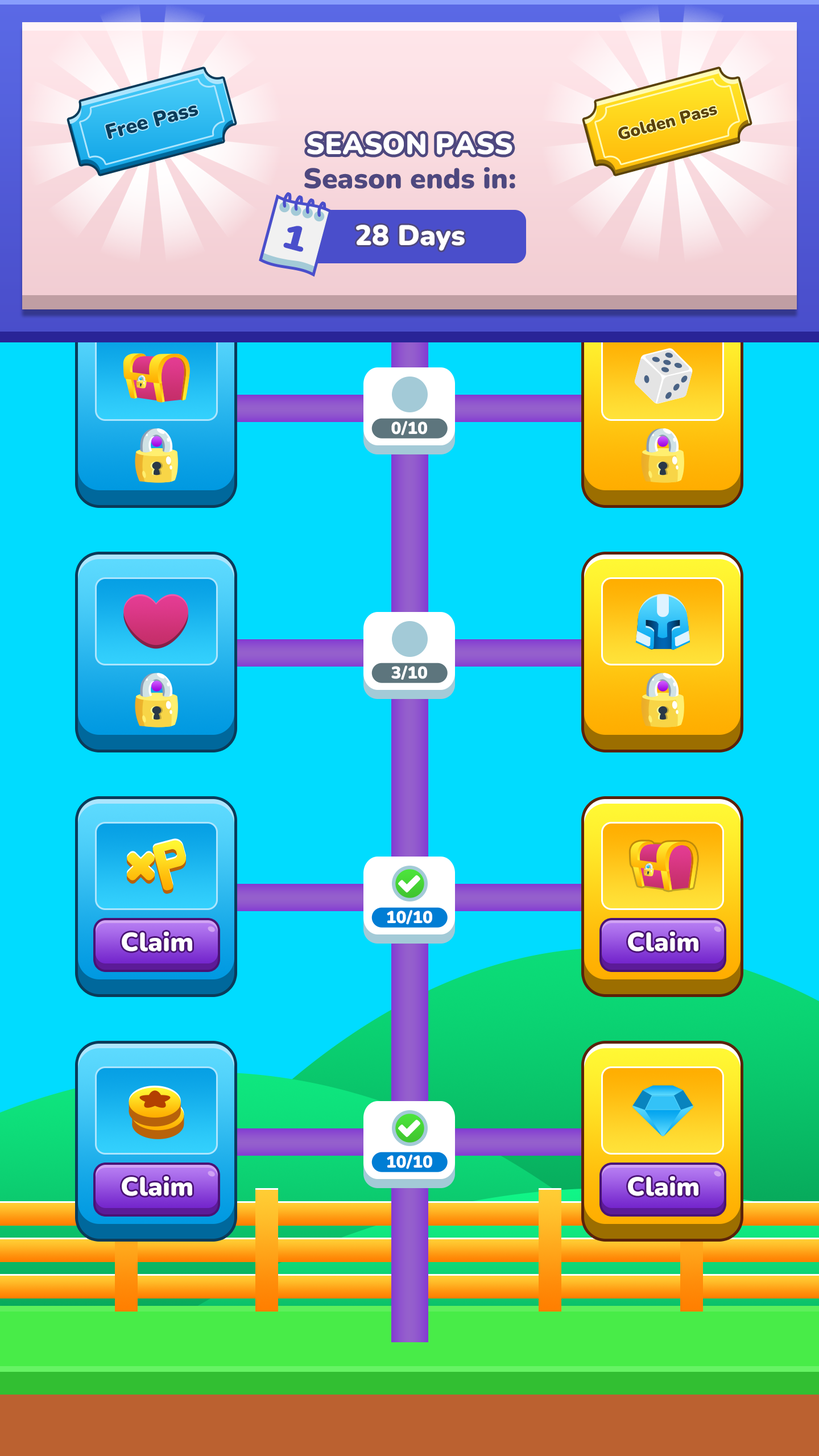
<style>
.page{position:relative;width:819px;height:1456px;background:#00dcff}
.page>*{position:absolute;margin:0}
.t1{font:20.5px "Nunito-Black";color:#0a3b5a}
.t2{font:17.1px "Nunito-Black";color:#5a420a}
.t3{font:28.4px "Nunito-Black";color:#ffffff}
.t4{font:28.4px "Nunito-Black";color:#4e487f}
.t5{font:34.4px "Nunito-Black";color:#4a4ecb;scale:1.16 1}
.t6{font:17.1px "Nunito-Black";color:#ffffff}
.t7{font:26px "Nunito-Black";color:#ffffff}
</style>
<div class="page">
<p class="t1" style="left:105px;top:105px;width:93px;height:34px;rotate:-15deg">Free Pass</p>
<p class="t2" style="left:618px;top:106px;width:99px;height:33px;rotate:-15deg">Golden Pass</p>
<p class="t3" style="left:307px;top:134px;width:205px;height:21px">SEASON PASS</p>
<p class="t4" style="left:304px;top:167px;width:211px;height:22px">Season ends in:</p>
<p class="t5" style="left:283px;top:226px;width:21px;height:26px;rotate:15deg">1</p>
<p class="t3" style="left:356px;top:225px;width:109px;height:26px">28 Days</p>
<p class="t6" style="left:391px;top:421px;width:36px;height:15px">0/10</p>
<p class="t6" style="left:391px;top:665px;width:36px;height:15px">3/10</p>
<p class="t6" style="left:387px;top:910px;width:45px;height:15px">10/10</p>
<p class="t7" style="left:122px;top:932px;width:70px;height:20px">Claim</p>
<p class="t7" style="left:628px;top:932px;width:70px;height:20px">Claim</p>
<p class="t6" style="left:387px;top:1155px;width:45px;height:14px">10/10</p>
<p class="t7" style="left:122px;top:1176px;width:70px;height:20px">Claim</p>
<p class="t7" style="left:628px;top:1176px;width:70px;height:20px">Claim</p>
</div>
